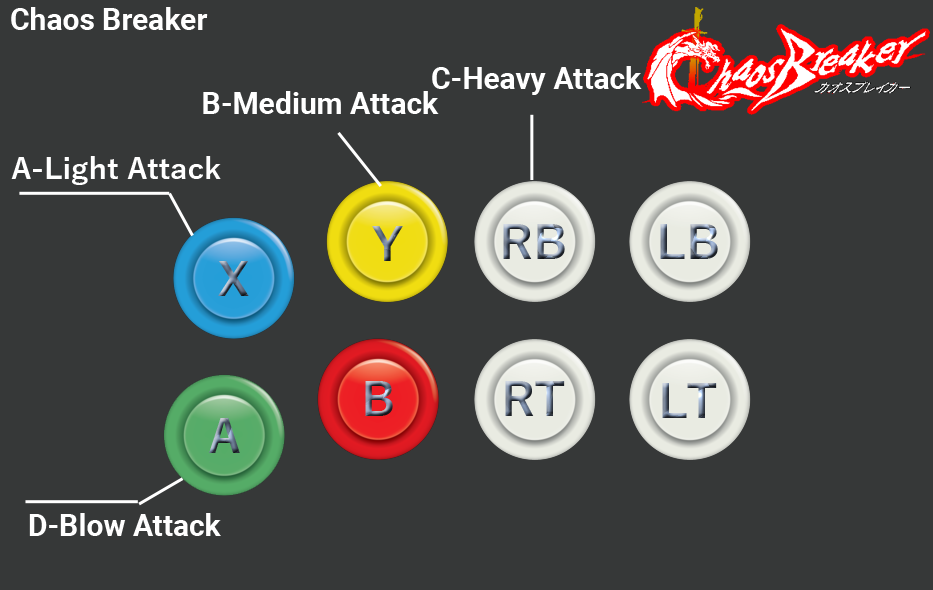
<style>
.page{position:relative;width:933px;height:590px;background:#363838}
.page>*{position:absolute;margin:0}
.t1{font:30px "Roboto-Bold";color:#ffffff}
.t2{font:30px "YuGothic-Bold";color:#ffffff}
</style>
<div class="page">
<p class="t1" style="left:11px;top:7px;width:197px;height:23px">Chaos Breaker</p>
<p class="t1" style="left:432px;top:66px;width:210px;height:29px">C-Heavy Attack</p>
<p class="t1" style="left:203px;top:91px;width:236px;height:23px">B-Medium Attack</p>
<p class="t2" style="left:11px;top:156px;width:210px;height:29px">A-Light Attack</p>
<p class="t1" style="left:29px;top:513px;width:192px;height:23px">D-Blow Attack</p>
</div>
